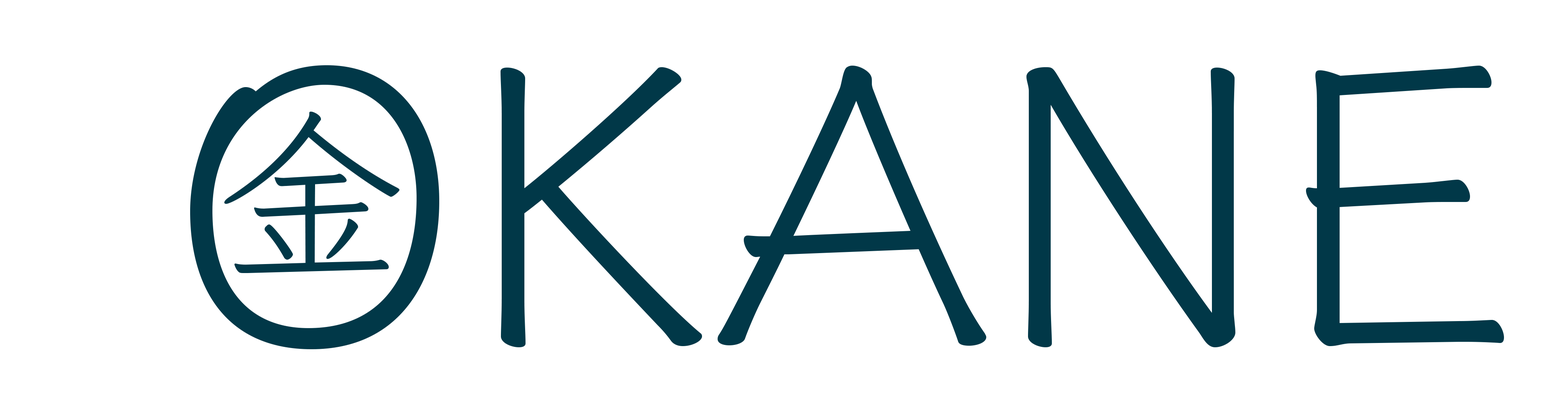
<style>
.page{position:relative;width:1568px;height:400px;background:#ffffff}
.page>*{position:absolute;margin:0}
.t1{font:390.4px "Klee-Medium";color:#013848}
.t2{font:191px "Klee-Medium";color:#013848}
</style>
<div class="page">
<p class="t1" style="left:190px;top:65px;width:1314px;height:284px">OKANE</p>
<p class="t2" style="left:224px;top:111px;width:176px;height:162px">金</p>
</div>
